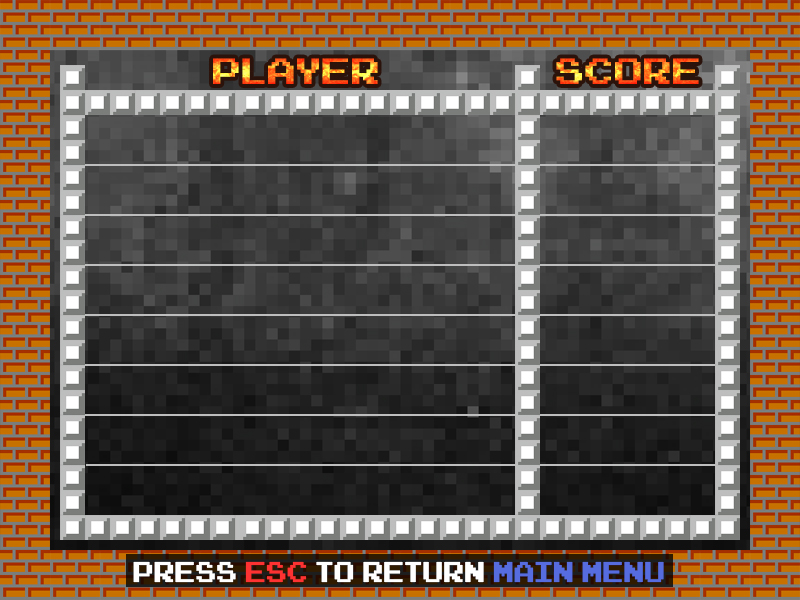
<style>
.page{position:relative;width:800px;height:600px}
.page>*{position:absolute;margin:0}
.t1{font:22.8px "bcFont-7x7";color:#ffffff;scale:0.92 1}
.t2{font:22.8px "bcFont-7x7";color:#fd3232;scale:0.92 1}
.t3{font:22.8px "bcFont-7x7";color:#566cdf;scale:0.92 1}
</style>
<div class="page">
<p class="t1" style="left:133px;top:561px;width:531px;height:22px">PRESS <span class="t2">ESC</span> TO RETURN <span class="t3">MAIN MENU</span></p>
</div>
